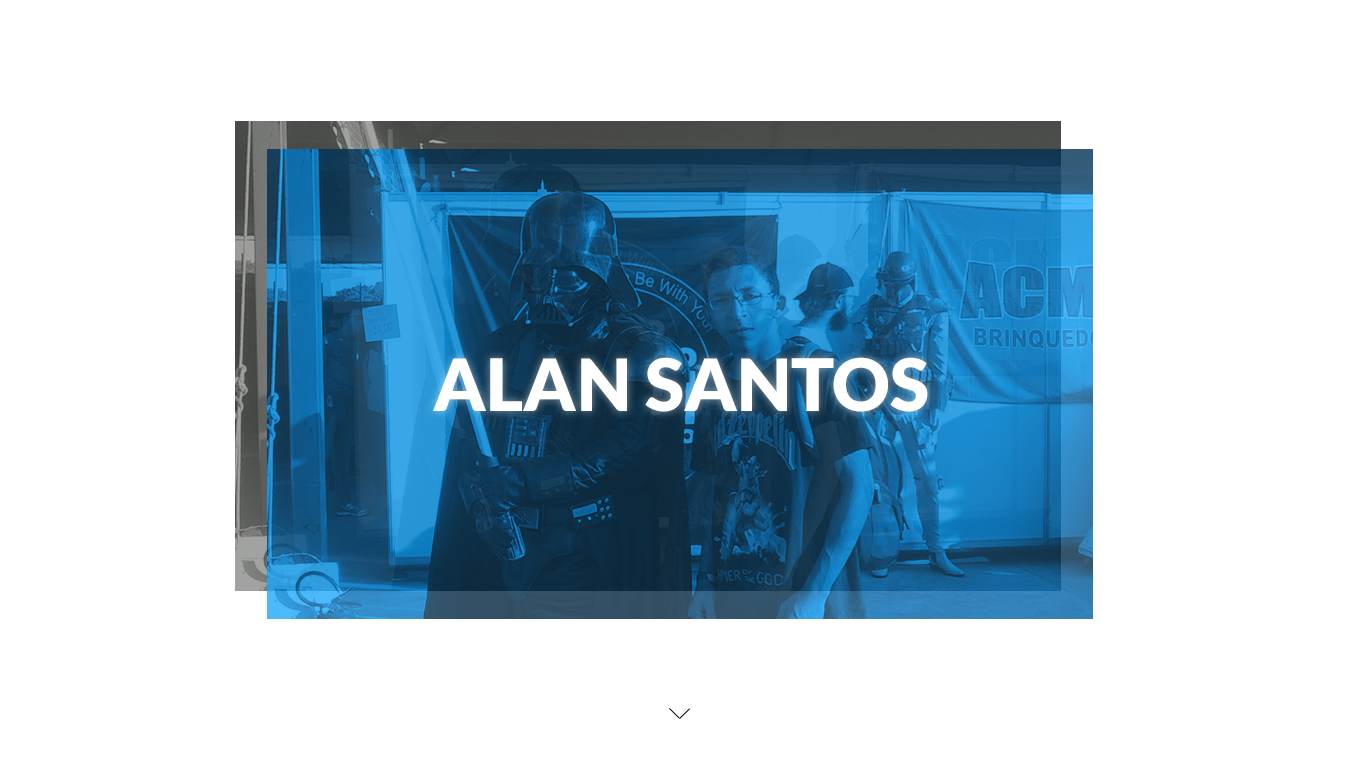
<style>
.page{position:relative;width:1360px;height:768px;background:#ffffff}
.page>*{position:absolute;margin:0}
.t1{font:72px "Lato-Black";color:#ffffff}
</style>
<div class="page">
<p class="t1" style="left:433px;top:357px;width:495px;height:55px">ALAN SANTOS</p>
</div>
